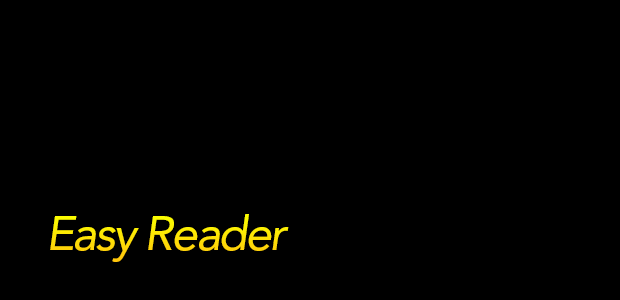
<style>
.page{position:relative;width:620px;height:300px;background:#000000}
.page>*{position:absolute;margin:0}
.t1{font:48px "Avenir-Oblique";letter-spacing:-0.05em;color:#fde306}
</style>
<div class="page">
<p class="t1" style="left:50px;top:214px;width:239px;height:48px">Easy Reader</p>
</div>
